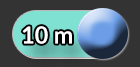
<style>
.page{position:relative;width:140px;height:67px;background:#333333}
.page>*{position:absolute;margin:0}
.t1{font:23.4px "Lato-Bold";color:#ffffff}
</style>
<div class="page">
<p class="t1" style="left:22px;top:26px;width:50px;height:18px">10 m</p>
</div>
